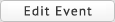
<style>
.page{position:relative;width:115px;height:22px}
.page>*{position:absolute;margin:0}
.t1{font:13px "PTSans-Regular";letter-spacing:0.075em;color:#373737;scale:1.04 1}
</style>
<div class="page">
<p class="t1" style="left:24px;top:6px;width:68px;height:10px">Edit Event</p>
</div>
